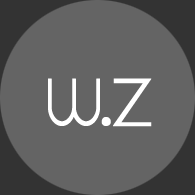
<style>
.page{position:relative;width:195px;height:195px;background:#646464}
.page>*{position:absolute;margin:0}
.t1{font:67px "Donovan-Regular";color:#ffffff;font-weight:bold}
.t2{font:67px "Donovan-Regular";color:#ffffff;font-weight:bold;scale:0.74 1}
</style>
<div class="page">
<p class="t1" style="left:48px;top:78px;width:104px;height:49px"><span class="t2">w</span>.z</p>
</div>
